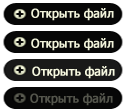
<style>
.page{position:relative;width:125px;height:112px;background:#070707}
.page>*{position:absolute;margin:0}
.t1{font:12px "Tahoma";color:#f1f3da;font-weight:bold}
.t2{font:12px "Tahoma";color:#f5f7df;font-weight:bold}
.t3{font:12px "Tahoma";color:#54554c;font-weight:bold}
</style>
<div class="page">
<p class="t1" style="left:31px;top:8px;width:83px;height:13px">Открыть файл</p>
<p class="t1" style="left:31px;top:38px;width:83px;height:13px">Открыть файл</p>
<p class="t2" style="left:32px;top:66px;width:83px;height:13px">Открыть файл</p>
<p class="t3" style="left:30px;top:93px;width:83px;height:13px">Открыть файл</p>
</div>
